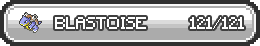
<style>
.page{position:relative;width:260px;height:46px;background:#ababab}
.page>*{position:absolute;margin:0}
.t1{font:16px "Minecraft";color:#ffffff}
</style>
<div class="page">
<p class="t1" style="left:55px;top:17px;width:91px;height:12px">BLASTOISE</p>
<p class="t1" style="left:190px;top:17px;width:54px;height:12px">121/121</p>
</div>
